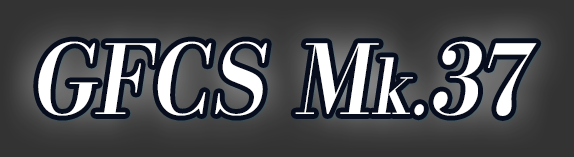
<style>
.page{position:relative;width:574px;height:157px}
.page>*{position:absolute;margin:0}
.t1{font:96px "KochoStd-Heavy";letter-spacing:0.02em;color:#ffffff;font-style:italic;scale:0.83 1}
.t2{font:76.8px "KochoStd-Heavy";letter-spacing:0.02em;color:#ffffff;font-style:italic;scale:0.83 1}
</style>
<div class="page">
<p class="t1" style="left:38px;top:41px;width:499px;height:75px">GFCS M<span class="t2">k.</span>37</p>
</div>
